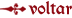
<style>
.page{position:relative;width:72px;height:18px;background:#ffffff}
.page>*{position:absolute;margin:0}
.t1{font:16px "Kelmscott-Regular";color:#8e0a12}
</style>
<div class="page">
<p class="t1" style="left:28px;top:1px;width:44px;height:14px">voltar</p>
</div>
